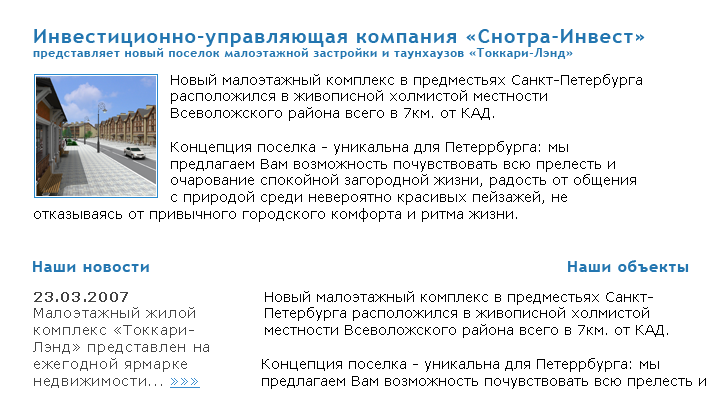
<style>
.page{position:relative;width:719px;height:411px;background:#ffffff}
.page>*{position:absolute;margin:0}
.t1{font:12px "TrebuchetMS-Bold";letter-spacing:0.05em;color:#2376b0}
.t2{font:20px "TrebuchetMS-Bold";letter-spacing:0.05em;color:#2376b0}
.t3{font:14px "Verdana";color:#000000}
.t4{font:16px "TrebuchetMS-Bold";letter-spacing:0.05em;color:#2376b0}
.t5{font:14px "Verdana";letter-spacing:0.05em;color:#444444}
.t6{font:14px "Verdana-Bold";letter-spacing:0.05em;color:#444444}
.t7{font:14px "Verdana";letter-spacing:0.05em;color:#398dd0;text-decoration:underline}
.t8{font:14px "Verdana";color:#010000}
</style>
<div class="page">
<p class="t1" style="left:33px;top:29px;width:612px;height:30px"><span class="t2">Инвестиционно-управляющая компания «Снотра-Инвест»<br></span>представляет новый поселок малоэтажной застройки и таунхаузов «Токкари-Лэнд»</p>
<p class="t3" style="left:34px;top:74px;width:608px;height:148px">Новый малоэтажный комплекс в предместьях Санкт-Петербурга      расположился в живописной холмистой местности <br>    Всеволожского района всего в 7км. от КАД.<br><br>    Концепция поселка - уникальна для Петеррбурга: мы       предлагаем Вам возможность почувствовать всю прелесть и      очарование спокойной загородной жизни, радость от общения      с природой среди невероятно красивых пейзажей, не отказываясь от привычного городского комфорта и ритма жизни.</p>
<p class="t4" style="left:33px;top:261px;width:116px;height:11px">Наши новости</p>
<p class="t4" style="left:568px;top:260px;width:121px;height:12px">Наши объекты</p>
<p class="t5" style="left:33px;top:292px;width:176px;height:96px"><span class="t6">23.03.2007<br></span>Малоэтажный жилой комплекс «Токкари-Лэнд» представлен на ежегодной ярмарке недвижимости... <span class="t7">»»»</span></p>
<p class="t8" style="left:262px;top:291px;width:444px;height:98px">Новый малоэтажный комплекс в предместьях Санкт-Петербурга расположился в живописной холмистой местности Всеволожского района всего в 7км. от КАД.<br><br>Концепция поселка - уникальна для Петеррбурга: мы  предлагаем Вам возможность почувствовать всю прелесть и      очарование спокойной загородной жизни, радость от общения      с природой среди невероятно красивых пейзажей, не отказываясь от привычного городского комфорта и ритма жизни.</p>
</div>
